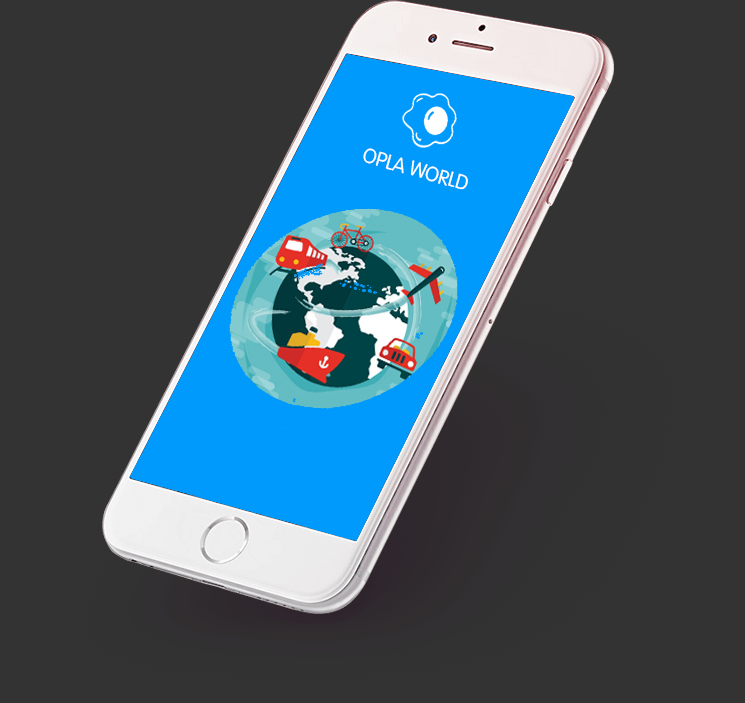
<style>
.page{position:relative;width:745px;height:703px;background:#333333}
.page>*{position:absolute;margin:0}
.t1{font:20px "UVNVan";color:#ffffff}
</style>
<div class="page">
<p class="t1" style="left:363px;top:148px;width:105px;height:42px;rotate:16deg">OPLA WORLD</p>
</div>
